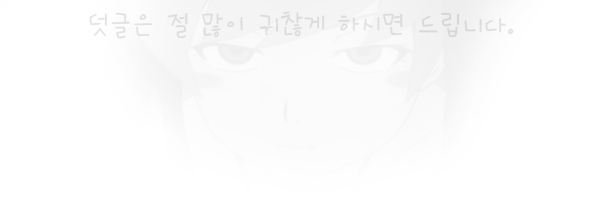
<style>
.page{position:relative;width:600px;height:200px;background:#ffffff}
.page>*{position:absolute;margin:0}
.t1{font:30px "CreChoM";color:#dddddd}
</style>
<div class="page">
<p class="t1" style="left:89px;top:11px;width:425px;height:28px">덧글은 절 많이 귀찮게 하시면 드립니다.</p>
</div>
